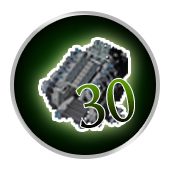
<style>
.page{position:relative;width:170px;height:170px;background:#ffffff}
.page>*{position:absolute;margin:0}
.t1{font:69.6px "LinuxBiolinumG"}
</style>
<div class="page">
<p class="t1" style="left:76px;top:79px;width:58px;height:50px;rotate:-10deg">30</p>
</div>
